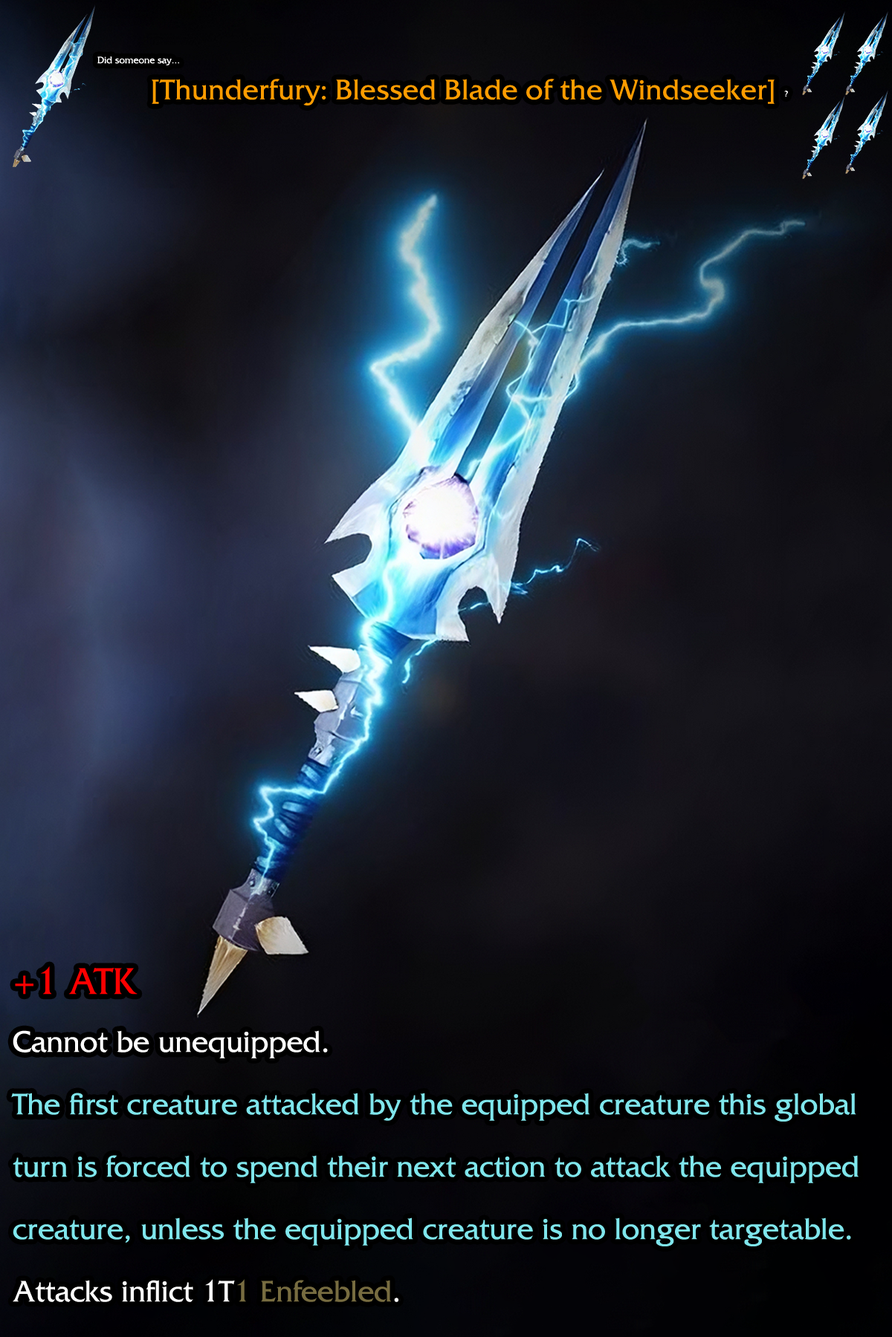
<style>
.page{position:relative;width:892px;height:1337px}
.page>*{position:absolute;margin:0}
.t1{font:17.1px "FrizQuadrataStd";color:#ffffff}
.t2{font:48.3px "FrizQua-ReguOS";color:#ff9c00}
.t3{font:14.9px "FrizQuadrataStd";color:#ffffff}
.t4{font:53.5px/62.4px "FrizQuadrataStd";color:#7fe6ec}
.t5{font:66.9px/62.4px "FrizQuadrataStd";color:#ff0000}
.t6{font:53.5px/62.4px "FrizQuadrataStd";color:#ffffff}
.t7{font:53.5px/62.4px "FrizQuadrataStd";color:#776c40}
</style>
<div class="page">
<p class="t1" style="left:97px;top:56px;width:82px;height:9px">Did someone say...</p>
<p class="t2" style="left:152px;top:79px;width:622px;height:27px">[Thunderfury: Blessed Blade of the Windseeker]</p>
<p class="t3" style="left:784px;top:91px;width:4px;height:6px">?</p>
<p class="t4" style="left:11px;top:967px;width:847px;height:335px"><span class="t5">+1 ATK<br></span><span class="t6">Cannot be unequipped.<br></span>The first creature attacked by the equipped creature this global turn is forced to spend their next action to attack the equipped creature, unless the equipped creature is no longer targetable.<br><span class="t6">Attacks inflict 1T</span><span class="t7">1 Enfeebled</span><span class="t6">.</span></p>
</div>
